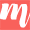
<style>
.page{position:relative;width:30px;height:30px;background:#f9615b}
.page>*{position:absolute;margin:0}
.t1{font:42px "ChocolateHeart";color:#ffffff}
</style>
<div class="page">
<p class="t1" style="left:0px;top:3px;width:32px;height:25px">m</p>
</div>
